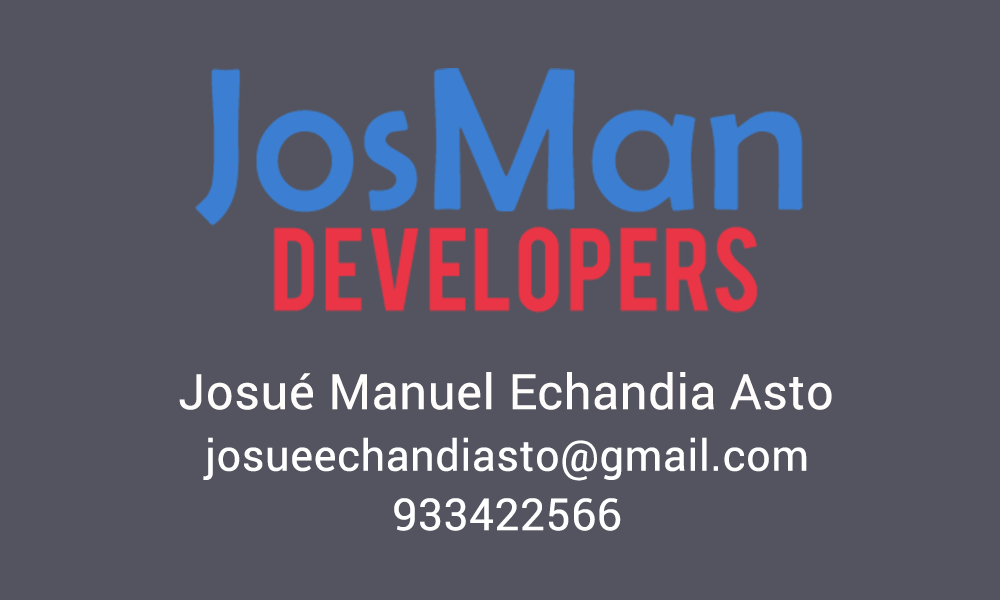
<style>
.page{position:relative;width:1000px;height:600px;background:#535460}
.page>*{position:absolute;margin:0}
.t1{font:48.7px "Roboto-Regular";letter-spacing:0.015em;color:#fffcfc}
.t2{font:43.1px "Roboto-Regular";letter-spacing:0.015em;color:#ffffff}
.t3{font:44.2px "Roboto-Regular";letter-spacing:0.015em;color:#ffffff}
</style>
<div class="page">
<p class="t1" style="left:179px;top:372px;width:653px;height:38px">Josué Manuel Echandia Asto</p>
<p class="t2" style="left:203px;top:437px;width:604px;height:44px">josueechandiasto@gmail.com</p>
<p class="t3" style="left:394px;top:498px;width:227px;height:33px">933422566</p>
</div>
